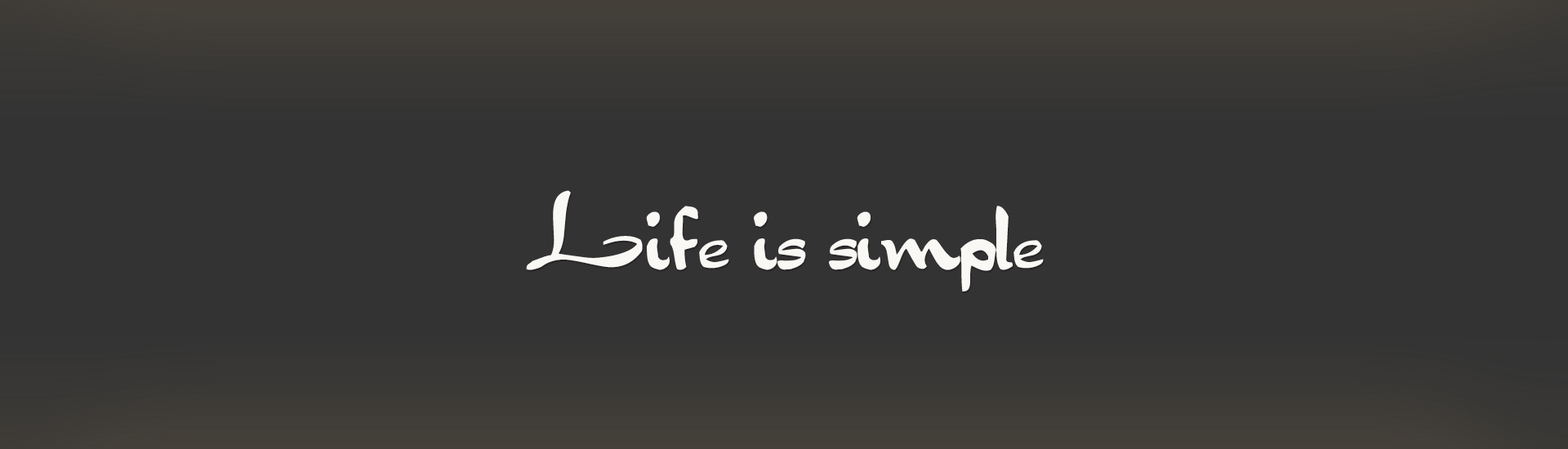
<style>
.page{position:relative;width:1568px;height:449px;background:#333333}
.page>*{position:absolute;margin:0}
.t1{font:101.4px "ft66-Bold";letter-spacing:-0.014em;color:#f9f8f5;scale:0.74 1}
</style>
<div class="page">
<p class="t1" style="left:526px;top:190px;width:518px;height:102px">Life is simple</p>
</div>
